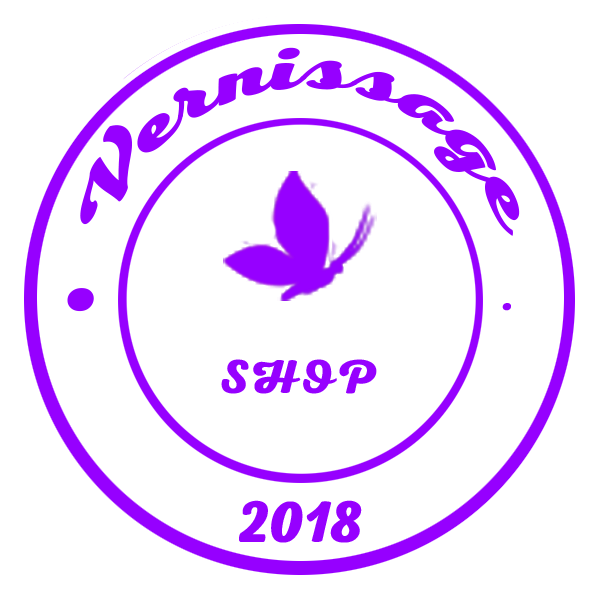
<style>
.page{position:relative;width:600px;height:600px;background:#ffffff}
.page>*{position:absolute;margin:0}
.t1{font:60px "NexaScript-Heavy";color:#9600ff}
.t2{font:150px "NexaScript-Heavy";color:#9600ff}
.t3{font:48px "NexaScript-Heavy";color:#9600ff}
</style>
<div class="page">
<p class="t1" style="left:80px;top:47px;width:440px;height:189px">Vernissage</p>
<p class="t2" style="left:67px;top:288px;width:27px;height:24px">.</p>
<p class="t3" style="left:502px;top:303px;width:9px;height:8px">.</p>
<p class="t3" style="left:221px;top:359px;width:156px;height:35px">SHOP</p>
<p class="t1" style="left:239px;top:500px;width:123px;height:43px">2018</p>
</div>
